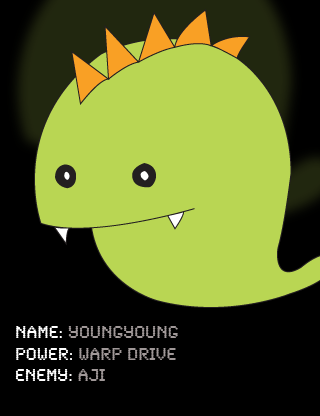
<style>
.page{position:relative;width:320px;height:416px;background:#000000}
.page>*{position:absolute;margin:0}
.t1{font:18px "SynchroLET";color:#a09898}
.t2{font:18px "SynchroLET";color:#ffffff}
</style>
<div class="page">
<p class="t1" style="left:15px;top:326px;width:163px;height:55px"><span class="t2">name:</span> YOUNGYOUNG<br><span class="t2">Power: </span>Warp Drive<br><span class="t2">Enemy:</span> AJI</p>
</div>
